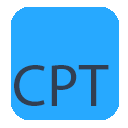
<style>
.page{position:relative;width:128px;height:128px;background:#27a9ff}
.page>*{position:absolute;margin:0}
.t1{font:60px "MyriadPro-Regular";color:#313f52}
</style>
<div class="page">
<p class="t1" style="left:14px;top:65px;width:95px;height:41px">CPT</p>
</div>
